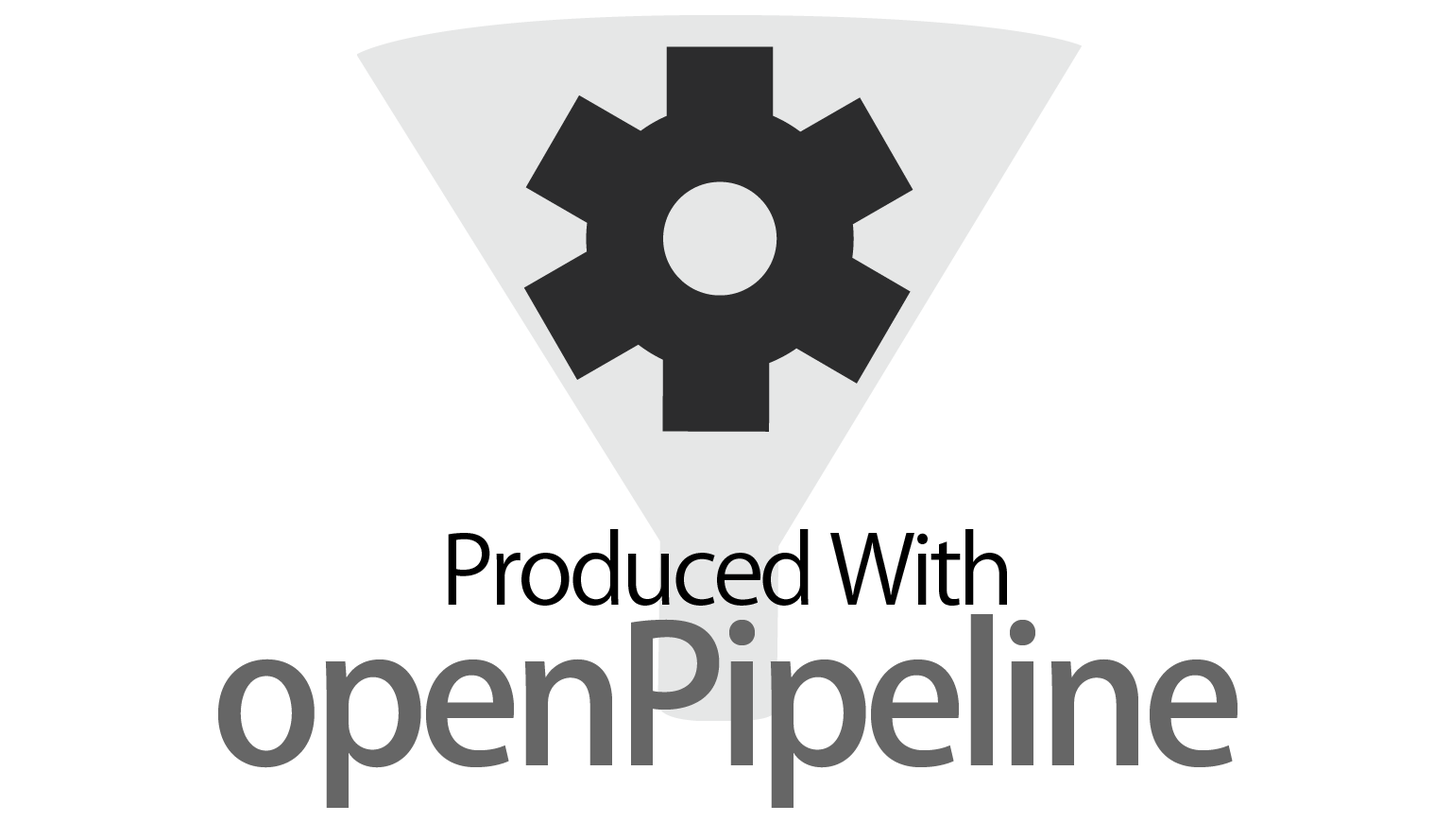
<style>
.page{position:relative;width:1451px;height:822px;background:#ffffff}
.page>*{position:absolute;margin:0}
.t1{font:94.5px/94.5px "KozGoPro-Regular";letter-spacing:-0.05em;color:#000000}
.t2{font:188.9px/160.6px "KozGoPro-Medium";letter-spacing:-0.05em;color:#666666}
</style>
<div class="page">
<p class="t1" style="left:218px;top:529px;width:1019px;height:279px;text-align:center">Produced With<br><span class="t2">openPipeline</span></p>
</div>
